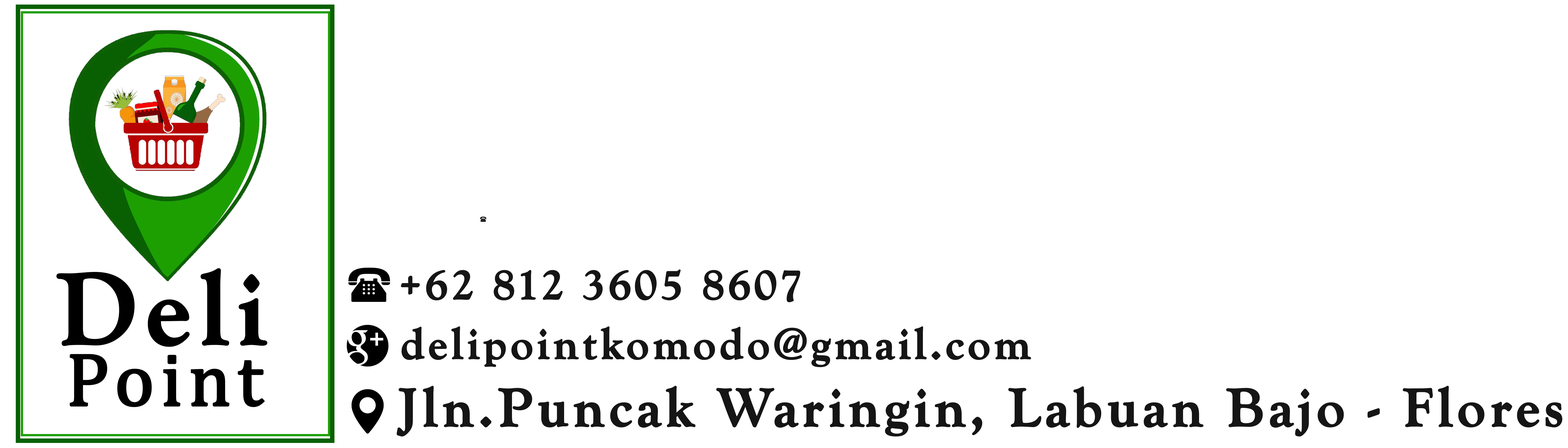
<style>
.page{position:relative;width:1568px;height:448px;background:#ffffff}
.page>*{position:absolute;margin:0}
.t1{font:104.7px "GoudyOldStyleT-Bold";letter-spacing:0.06em;color:#000000;font-weight:bold}
.t2{font:44.6px "GoudyOldStyleT-Bold";letter-spacing:0.06em;color:#141514;font-weight:bold}
.t3{font:75.6px "Cambria";letter-spacing:0.06em;color:#000000;font-weight:bold}
.t4{font:55.7px "GoudyOldStyleT-Bold";letter-spacing:0.06em;color:#141514;font-weight:bold}
</style>
<div class="page">
<p class="t1" style="left:56px;top:268px;width:211px;height:79px">Deli</p>
<p class="t2" style="left:401px;top:269px;width:399px;height:34px">+62 812 3605 8607</p>
<p class="t2" style="left:402px;top:326px;width:629px;height:42px">delipointkomodo@gmail.com</p>
<p class="t3" style="left:70px;top:354px;width:195px;height:53px">Point</p>
<p class="t4" style="left:396px;top:386px;width:1166px;height:51px">Jln.Puncak Waringin, Labuan Bajo - Flores</p>
</div>
